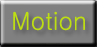
<style>
.page{position:relative;width:97px;height:47px;background:#808080}
.page>*{position:absolute;margin:0}
.t1{font:24px "GothicXB-HM";color:#bcde12}
</style>
<div class="page">
<p class="t1" style="left:11px;top:12px;width:76px;height:31px">Motion</p>
</div>
